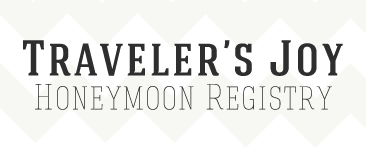
<style>
.page{position:relative;width:366px;height:150px;background:#f7f7f4}
.page>*{position:absolute;margin:0}
.t1{font:50px "HaginCapsMedium";letter-spacing:0.05em;color:#2e2e2e}
.t2{font:36px "HaginCapsThin";letter-spacing:0.05em;color:#2e2e2e}
</style>
<div class="page">
<p class="t1" style="left:23px;top:40px;width:320px;height:36px">Traveler’s Joy</p>
<p class="t2" style="left:35px;top:84px;width:297px;height:26px">Honeymoon Registry</p>
</div>
